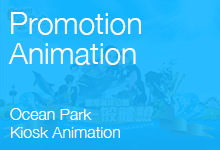
<style>
.page{position:relative;width:220px;height:150px}
.page>*{position:absolute;margin:0}
.t1{font:30px/30px "HelveticaNeue-Light";color:#ffffff}
.t2{font:16px/18px "HelveticaNeue-Light";color:#ffffff}
</style>
<div class="page">
<p class="t1" style="left:8px;top:12px;width:133px;height:53px">Promotion<br>Animation</p>
<p class="t2" style="left:10px;top:108px;width:110px;height:30px">Ocean Park<br>Kiosk Animation</p>
</div>
